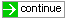
<style>
.page{position:relative;width:67px;height:20px;background:#ffffff}
.page>*{position:absolute;margin:0}
.t1{font:11px "ArialMT";color:#000000}
</style>
<div class="page">
<p class="t1" style="left:21px;top:4px;width:40px;height:8px">continue</p>
</div>
